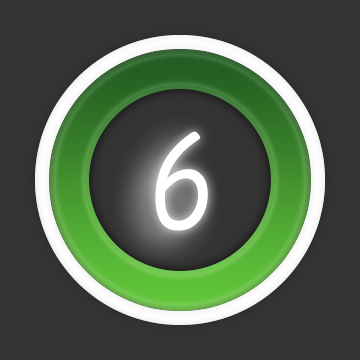
<style>
.page{position:relative;width:360px;height:360px;background:#333333}
.page>*{position:absolute;margin:0}
.t1{font:160px "Farsan-Regular";color:#ffffff}
</style>
<div class="page">
<p class="t1" style="left:155px;top:131px;width:53px;height:100px">6</p>
</div>
